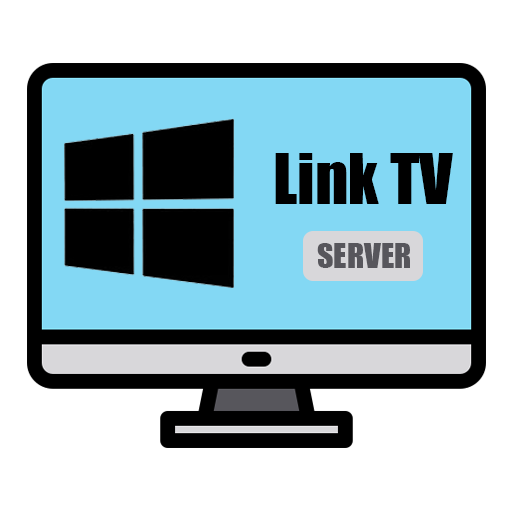
<style>
.page{position:relative;width:512px;height:512px;background:#ffffff}
.page>*{position:absolute;margin:0}
.t1{font:64px "Impact";color:#000000}
.t2{font:32px "Impact";color:#57565c}
</style>
<div class="page">
<p class="t1" style="left:275px;top:153px;width:178px;height:51px">Link TV</p>
<p class="t2" style="left:317px;top:243px;width:93px;height:25px">SERVER</p>
</div>
